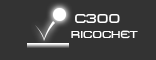
<style>
.page{position:relative;width:156px;height:60px;background:#333333}
.page>*{position:absolute;margin:0}
.t1{font:13px "MetroDF";color:#ffffff}
.t2{font:10.2px "MetroDF";color:#ffffff}
</style>
<div class="page">
<p class="t1" style="left:75px;top:14px;width:45px;height:9px">c300</p>
<p class="t2" style="left:71px;top:30px;width:67px;height:9px">RICOCHET</p>
</div>
